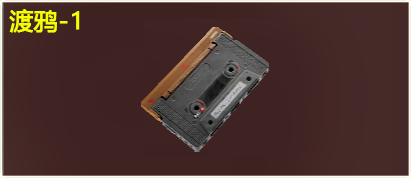
<style>
.page{position:relative;width:411px;height:178px}
.page>*{position:absolute;margin:0}
.t1{font:24px "MicrosoftYaHeiUI";color:#f4ff00;font-weight:bold}
</style>
<div class="page">
<p class="t1" style="left:9px;top:9px;width:71px;height:24px">渡鸦-1</p>
</div>
